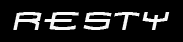
<style>
.page{position:relative;width:183px;height:42px;background:#000000}
.page>*{position:absolute;margin:0}
.t1{font:35px "Homoarakhn";color:#f7f7f7}
</style>
<div class="page">
<p class="t1" style="left:13px;top:12px;width:157px;height:18px">resty</p>
</div>
